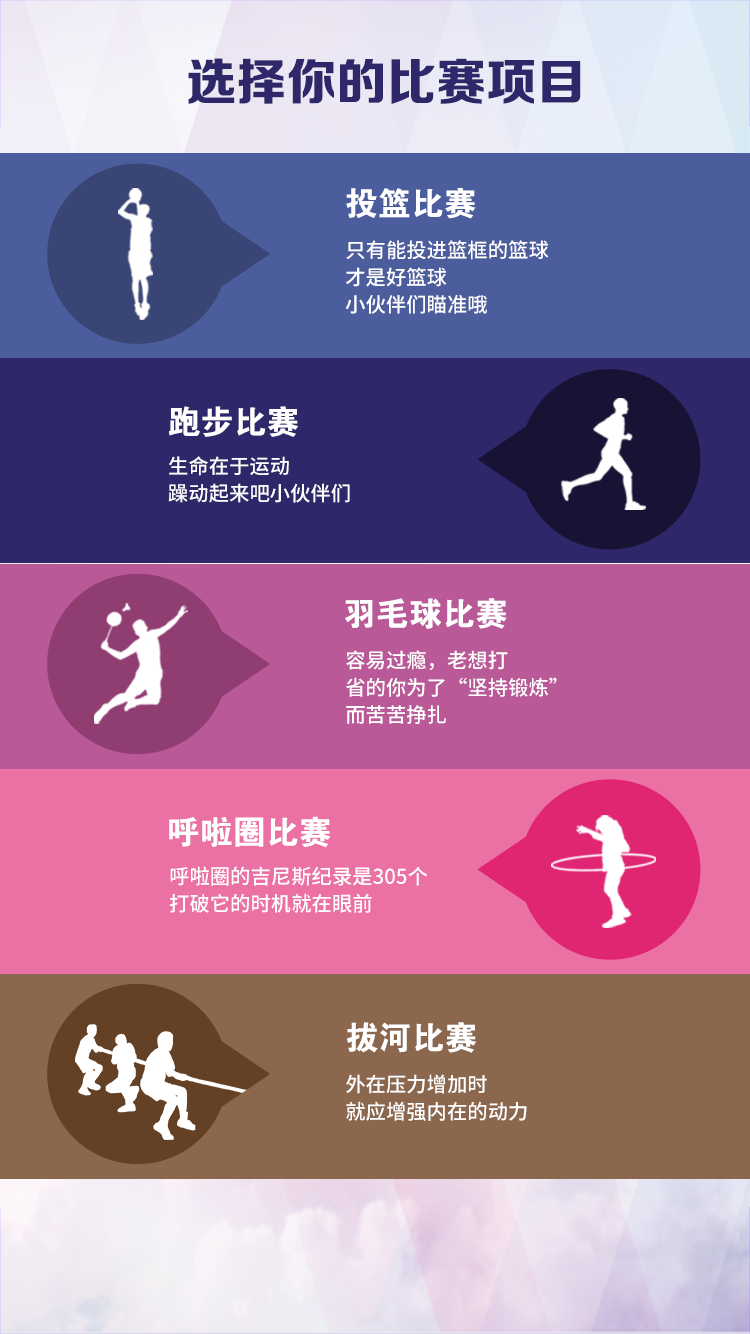
<style>
.page{position:relative;width:750px;height:1334px}
.page>*{position:absolute;margin:0}
.t1{font:50px "FZZDHJW--GB1-0";color:#2e2769}
.t2{font:32.9px "FZDHTJW--GB1-0";color:#ffffff}
.t3{font:20.3px/27.3px "SourceHanSansCN-Medium";color:#ffffff}
</style>
<div class="page">
<p class="t1" style="left:188px;top:58px;width:393px;height:46px">选择你的比赛项目</p>
<p class="t2" style="left:346px;top:188px;width:130px;height:31px">投篮比赛</p>
<p class="t3" style="left:345px;top:240px;width:204px;height:74px">只有能投进篮框的篮球<br>才是好篮球<br>小伙伴们瞄准哦</p>
<p class="t2" style="left:169px;top:406px;width:130px;height:31px">跑步比赛</p>
<p class="t3" style="left:168px;top:456px;width:182px;height:47px">生命在于运动<br>躁动起来吧小伙伴们</p>
<p class="t2" style="left:345px;top:598px;width:162px;height:31px">羽毛球比赛</p>
<p class="t3" style="left:346px;top:650px;width:211px;height:74px">容易过瘾，老想打<br>省的你为了“坚持锻炼”<br>而苦苦挣扎</p>
<p class="t2" style="left:169px;top:816px;width:162px;height:32px">呼啦圈比赛</p>
<p class="t3" style="left:169px;top:866px;width:259px;height:47px">呼啦圈的吉尼斯纪录是305个<br>打破它的时机就在眼前</p>
<p class="t2" style="left:347px;top:1022px;width:130px;height:31px">拔河比赛</p>
<p class="t3" style="left:346px;top:1074px;width:181px;height:47px">外在压力增加时<br>就应增强内在的动力</p>
</div>
